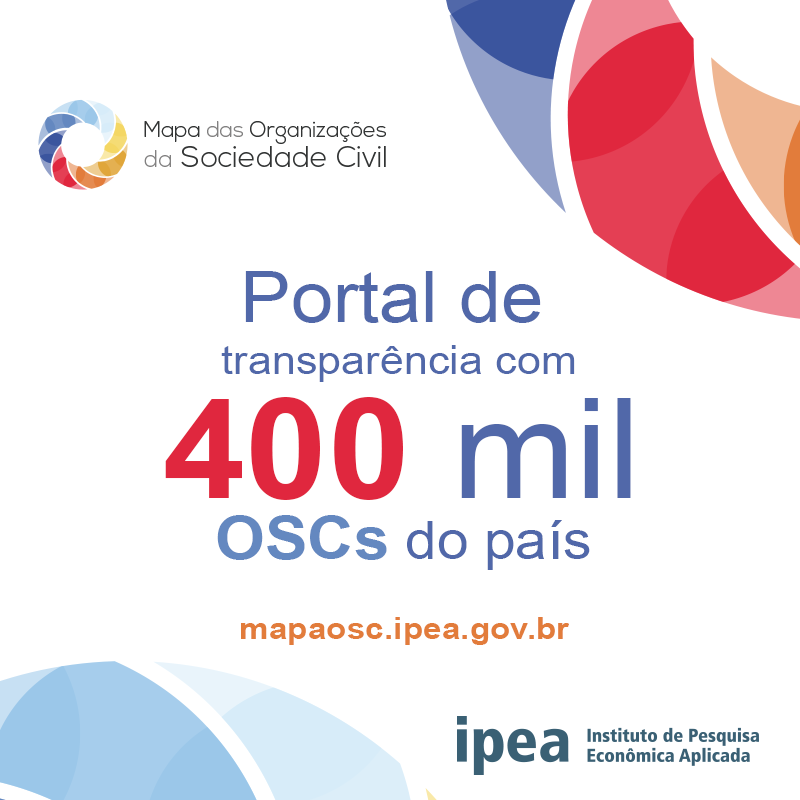
<style>
.page{position:relative;width:800px;height:800px;background:#ffffff}
.page>*{position:absolute;margin:0}
.t1{font:70.7px "ArialMT";color:#5168a9;scale:1.07 1}
.t2{font:40.3px "ArialMT";color:#5168a9;scale:1.07 1}
.t3{font:138.8px "Arial-BoldMT";color:#e0273e;scale:1.07 1}
.t4{font:138.8px "ArialMT";color:#5168a9;scale:1.07 1}
.t5{font:53px "ArialMT";color:#5168a9;scale:1.07 1}
.t6{font:60px "Arial-BoldMT";color:#6488c0;scale:1.07 1}
.t7{font:31.3px "Arial-BoldMT";color:#e27c3b;scale:1.07 1}
</style>
<div class="page">
<p class="t1" style="left:245px;top:271px;width:296px;height:52px">Portal de</p>
<p class="t2" style="left:221px;top:345px;width:354px;height:37px">transparência com</p>
<p class="t3" style="left:165px;top:397px;width:466px;height:103px">400<span class="t4"> mil</span></p>
<p class="t5" style="left:217px;top:515px;width:373px;height:55px"><span class="t6">OSCs</span> do país</p>
<p class="t7" style="left:241px;top:617px;width:328px;height:28px">mapaosc.ipea.gov.br</p>
</div>
